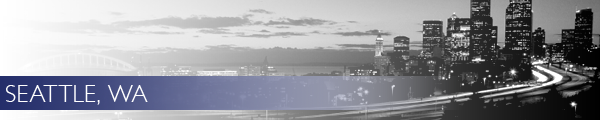
<style>
.page{position:relative;width:600px;height:120px}
.page>*{position:absolute;margin:0}
.t1{font:24px "GillSans-Light";letter-spacing:0.01em;color:#ffffff}
</style>
<div class="page">
<p class="t1" style="left:6px;top:85px;width:142px;height:20px">SEATTLE, WA</p>
</div>
